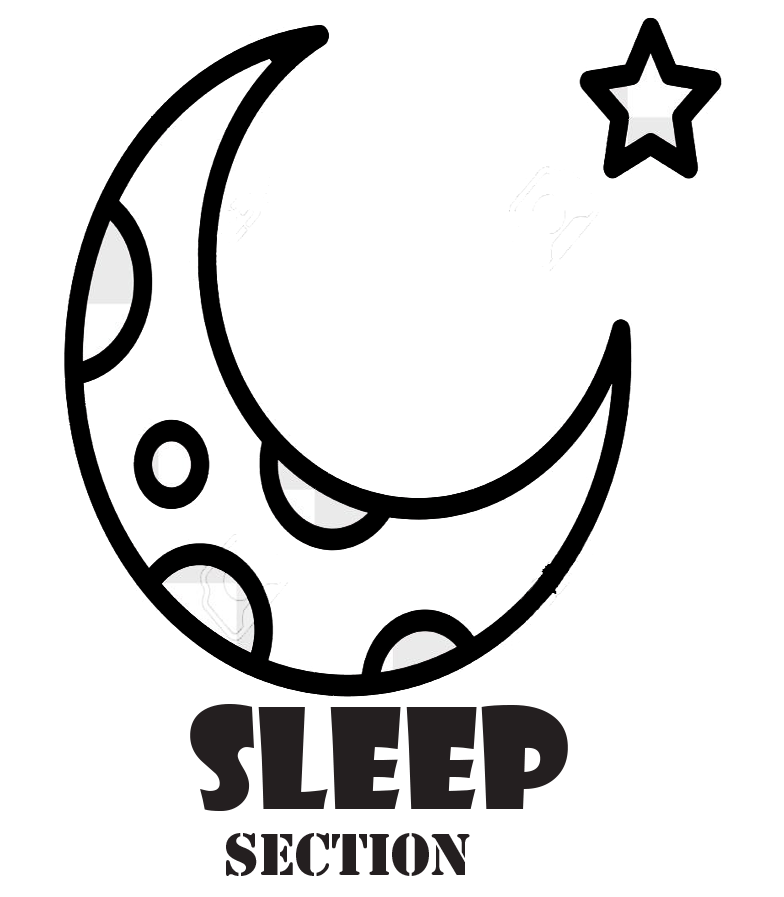
<style>
.page{position:relative;width:784px;height:897px;background:#ffffff}
.page>*{position:absolute;margin:0}
.t1{font:55px "StencilStd";color:#241f20}
.t2{font:136px "ShowcardGothic-Reg";color:#241f20}
</style>
<div class="page">
<p class="t1" style="left:190px;top:704px;width:378px;height:172px"><span class="t2">Sleep<br> </span>Section</p>
</div>
